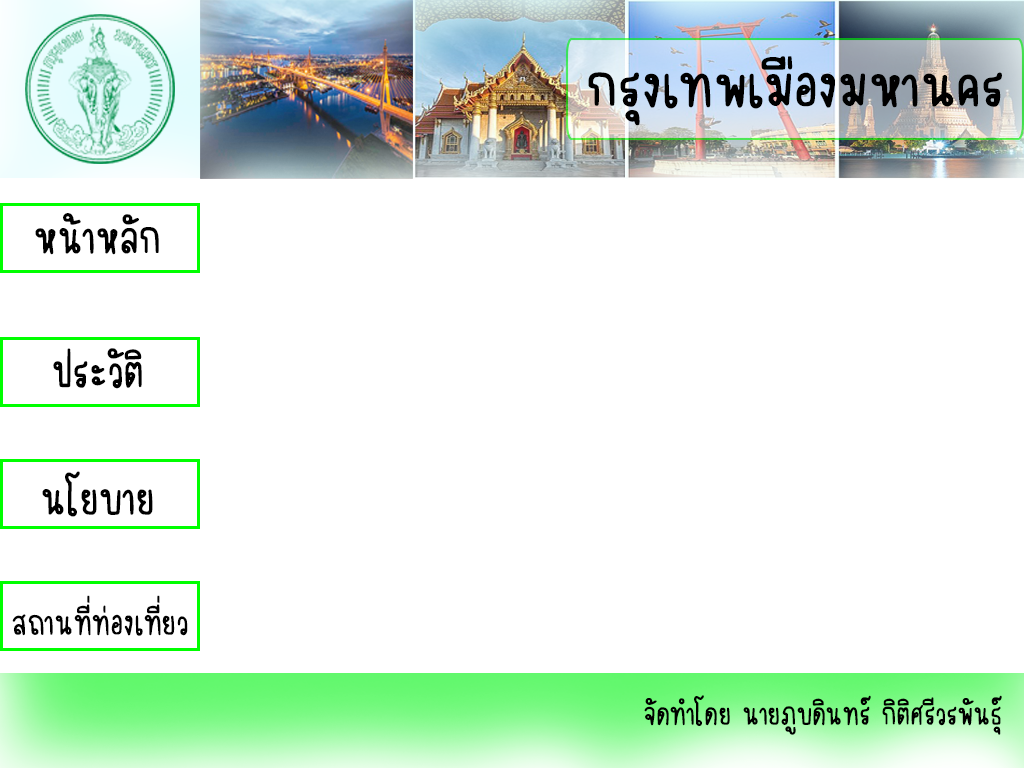
<style>
.page{position:relative;width:1024px;height:768px;background:#ffffff}
.page>*{position:absolute;margin:0}
.t1{font:62.5px "Mareeya";color:#000000;scale:1.11 1}
.t2{font:48.7px "Mareeya";color:#000000}
.t3{font:36.7px "Mareeya";color:#000000}
.t4{font:33.3px "Mareeya";color:#000000}
</style>
<div class="page">
<p class="t1" style="left:588px;top:56px;width:414px;height:70px">กรุงเทพเมืองมหานคร</p>
<p class="t2" style="left:35px;top:213px;width:124px;height:42px">หน้าหลัก</p>
<p class="t2" style="left:53px;top:348px;width:89px;height:41px">ประวัติ</p>
<p class="t2" style="left:42px;top:471px;width:111px;height:46px">นโยบาย</p>
<p class="t3" style="left:12px;top:595px;width:176px;height:41px">สถานที่ท่องเที่ยว</p>
<p class="t4" style="left:644px;top:695px;width:358px;height:40px">จัดทำโดย นายภูบดินทร์ กิติศรีวรพันธุ์</p>
</div>
